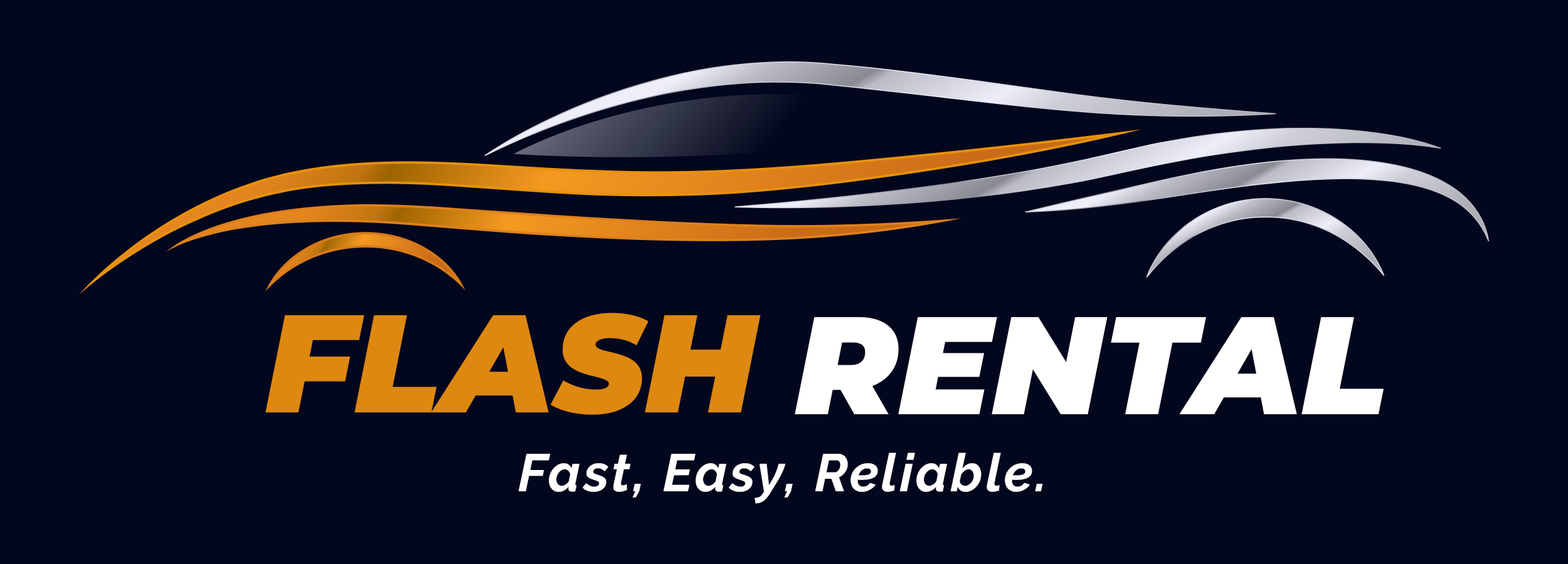
<style>
.page{position:relative;width:1568px;height:564px;background:#03071d}
.page>*{position:absolute;margin:0}
.t1{font:138.8px "Montserrat-BlackItalic";color:#dd8811}
.t2{font:138.8px "Montserrat-BlackItalic";color:#ffffff}
.t3{font:52.7px "Raleway-BoldItalic";letter-spacing:0.05em;color:#ffffff}
</style>
<div class="page">
<p class="t1" style="left:265px;top:313px;width:496px;height:102px">FLASH</p>
<p class="t2" style="left:795px;top:317px;width:589px;height:98px">RENTAL</p>
<p class="t3" style="left:518px;top:453px;width:525px;height:51px">Fast, Easy, Reliable.</p>
</div>
